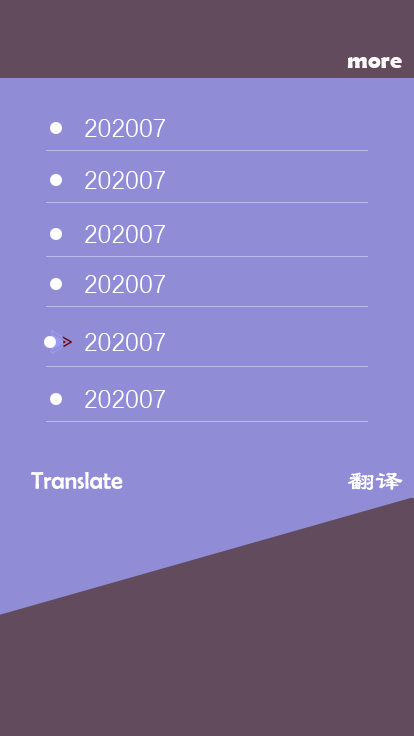
<style>
.page{position:relative;width:414px;height:736px;background:#908cd6}
.page>*{position:absolute;margin:0}
.t1{font:24px "BerlinSansFBDemi-Bold";color:#fcf8f8}
.t2{font:26px "DengXian";color:#ffffff}
.t3{font:24px "BerlinSansFB-Reg";color:#ffffff}
.t4{font:28px "LiSu";color:#ffffff}
</style>
<div class="page">
<p class="t1" style="left:347px;top:57px;width:55px;height:11px">more</p>
<p class="t2" style="left:85px;top:119px;width:80px;height:18px">202007</p>
<p class="t2" style="left:85px;top:171px;width:80px;height:18px">202007</p>
<p class="t2" style="left:85px;top:225px;width:80px;height:18px">202007</p>
<p class="t2" style="left:85px;top:275px;width:80px;height:18px">202007</p>
<p class="t2" style="left:85px;top:333px;width:80px;height:18px">202007</p>
<p class="t2" style="left:85px;top:390px;width:80px;height:18px">202007</p>
<p class="t3" style="left:31px;top:472px;width:92px;height:17px">Translate</p>
<p class="t4" style="left:348px;top:472px;width:55px;height:18px">翻译</p>
</div>
